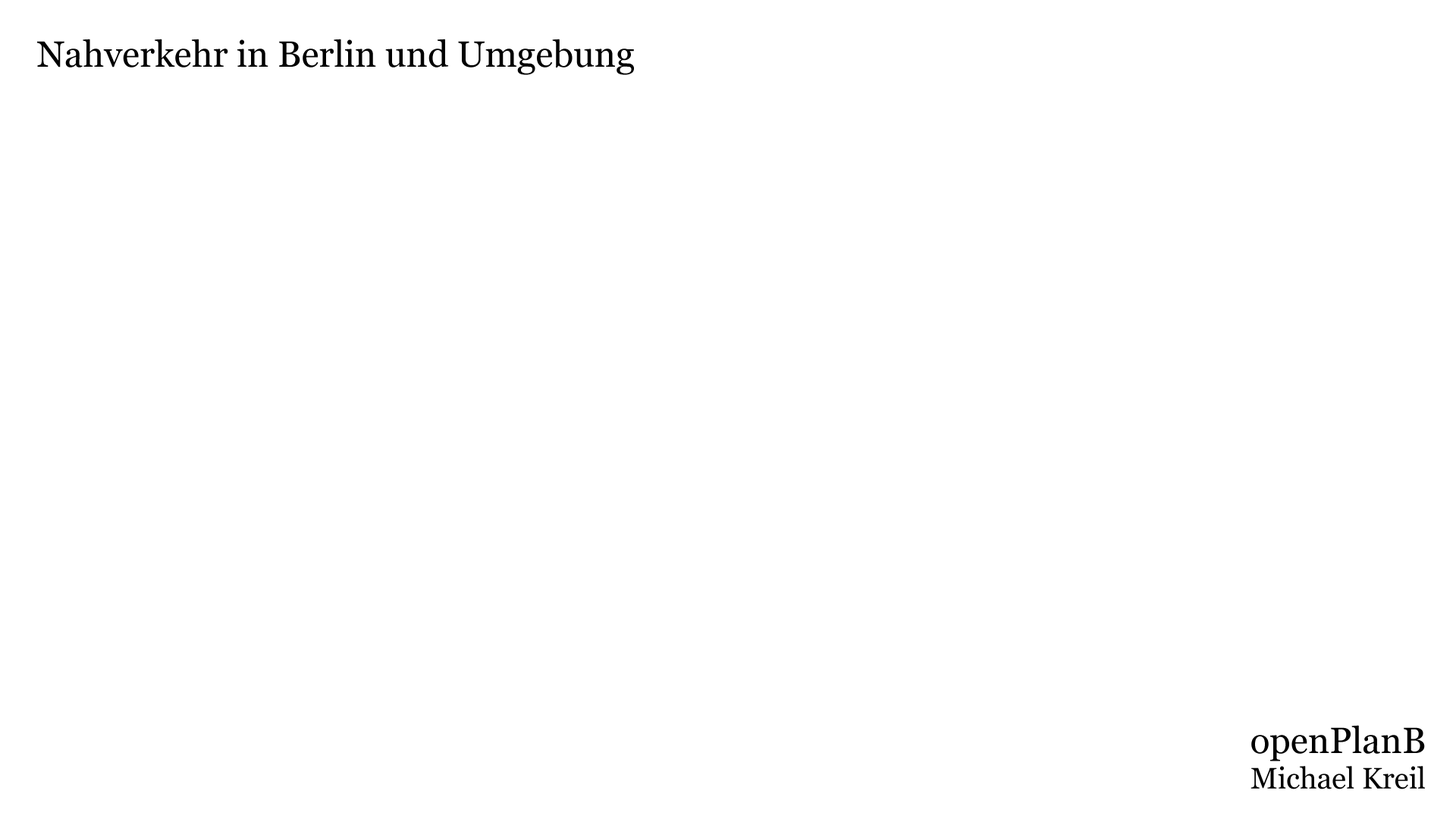
<style>
.page{position:relative;width:1456px;height:819px;background:#ffffff}
.page>*{position:absolute;margin:0}
.t1{font:36.4px "Georgia";color:#000000}
.t2{font:29.6px "Georgia";color:#000000}
</style>
<div class="page">
<p class="t1" style="left:37px;top:39px;width:597px;height:36px">Nahverkehr in Berlin und Umgebung</p>
<p class="t2" style="left:1250px;top:725px;width:175px;height:64px;text-align:right"><span class="t1">openPlanB<br></span>Michael Kreil</p>
</div>
